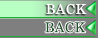
<style>
.page{position:relative;width:100px;height:38px;background:#7f7f7f}
.page>*{position:absolute;margin:0}
.t1{font:13.3px "CenturySchoolbook";letter-spacing:0.025em;color:#ffffff}
.t2{font:13.3px "CenturySchoolbook";letter-spacing:0.025em;color:#1e5029}
</style>
<div class="page">
<p class="t1" style="left:46px;top:4px;width:41px;height:11px">BACK</p>
<p class="t2" style="left:45px;top:22px;width:41px;height:11px">BACK</p>
</div>
